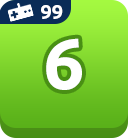
<style>
.page{position:relative;width:128px;height:138px}
.page>*{position:absolute;margin:0}
.t1{font:20px "Ubuntu-Bold";color:#ffffff}
.t2{font:72px "Ubuntu-Bold";color:#ffffff}
</style>
<div class="page">
<p class="t1" style="left:41px;top:5px;width:22px;height:14px">99</p>
<p class="t2" style="left:46px;top:38px;width:36px;height:52px">6</p>
</div>
